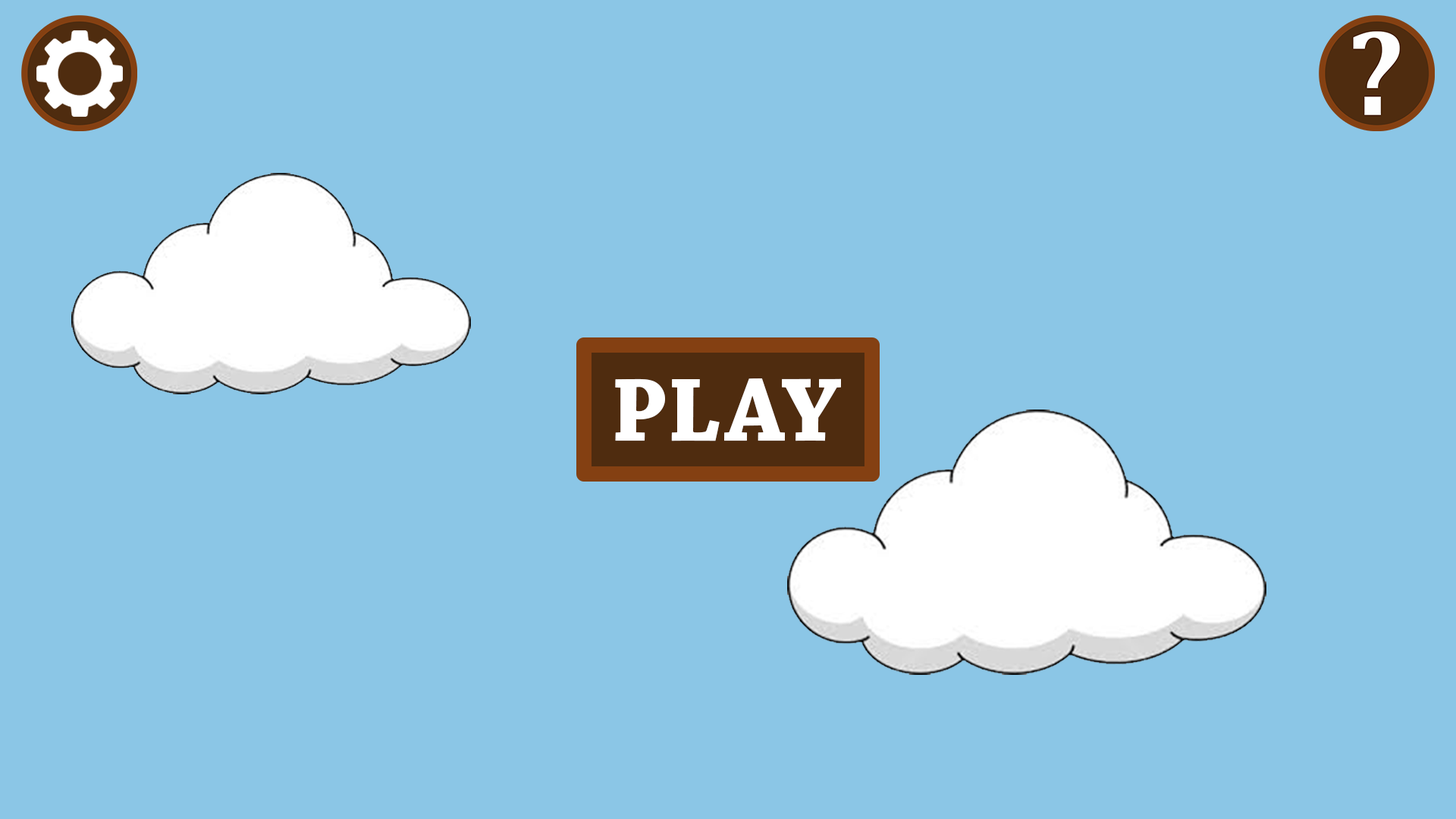
<style>
.page{position:relative;width:1456px;height:819px;background:#8bc6e6}
.page>*{position:absolute;margin:0}
.t1{font:94.8px "ChaparralPro-Bold";color:#ffffff}
</style>
<div class="page">
<p class="t1" style="left:615px;top:378px;width:226px;height:63px">PLAY</p>
</div>
